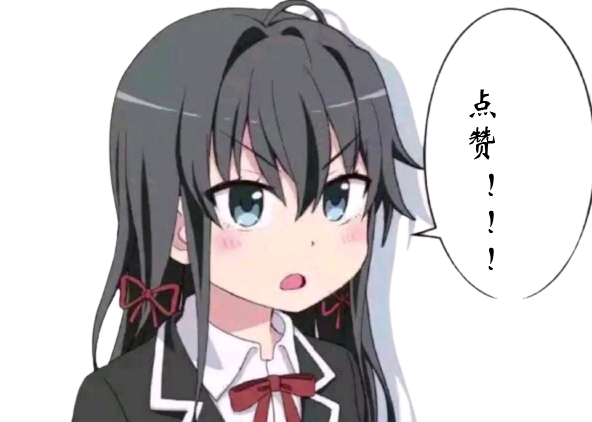
<style>
.page{position:relative;width:592px;height:422px;background:#ffffff}
.page>*{position:absolute;margin:0}
.t1{font:36px "STXinwei";color:#000000}
</style>
<div class="page">
<p class="t1" style="left:469px;top:89px;width:27px;height:181px">点赞 ！！！</p>
</div>
